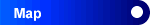
<style>
.page{position:relative;width:151px;height:25px}
.page>*{position:absolute;margin:0}
.t1{font:14px "Arial-BoldMT";color:#ffffff}
</style>
<div class="page">
<p class="t1" style="left:14px;top:8px;width:27px;height:13px">Map</p>
</div>
